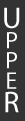
<style>
.page{position:relative;width:25px;height:121px;background:#333333}
.page>*{position:absolute;margin:0}
.t1{font:30px "MyriadPro-Regular";color:#ffffff;text-transform:uppercase}
.t2{font:24px "MyriadPro-Regular";color:#ffffff;text-transform:uppercase}
</style>
<div class="page">
<p class="t1" style="left:4px;top:7px;width:16px;height:22px">u</p>
<p class="t2" style="left:7px;top:32px;width:10px;height:17px">p</p>
<p class="t2" style="left:7px;top:52px;width:10px;height:17px">p</p>
<p class="t2" style="left:7px;top:72px;width:10px;height:17px">E</p>
<p class="t1" style="left:5px;top:91px;width:14px;height:22px">R</p>
</div>
